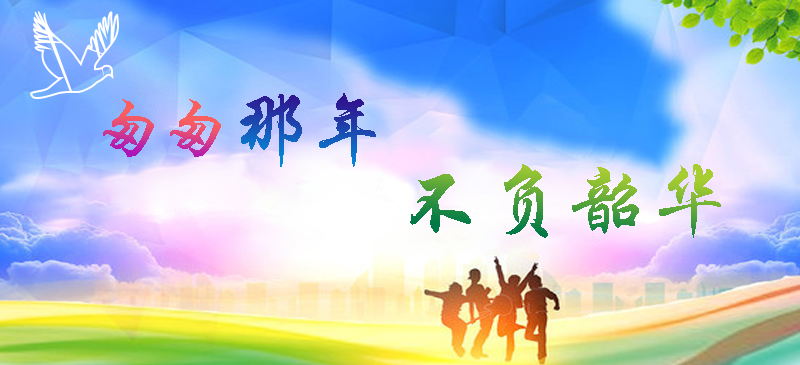
<style>
.page{position:relative;width:800px;height:365px}
.page>*{position:absolute;margin:0}
.t1{font:66.7px "STXingkai"}
.t2{font:79.2px "STXingkai"}
.t3{font:83.3px "STXingkai"}
</style>
<div class="page">
<p class="t1" style="left:103px;top:99px;width:118px;height:58px">匆匆</p>
<p class="t2" style="left:240px;top:93px;width:136px;height:74px">那年</p>
<p class="t3" style="left:410px;top:164px;width:311px;height:74px">不负韶华</p>
</div>
